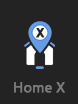
<style>
.page{position:relative;width:78px;height:104px;background:#232323}
.page>*{position:absolute;margin:0}
.t1{font:12px "Arial-BoldMT";color:#232323;font-weight:bold}
.t2{font:14px "SegoeUI";color:#7c7c7c;font-weight:bold}
</style>
<div class="page">
<p class="t1" style="left:36px;top:28px;width:9px;height:10px">X</p>
<p class="t2" style="left:14px;top:82px;width:51px;height:11px">Home X</p>
</div>
